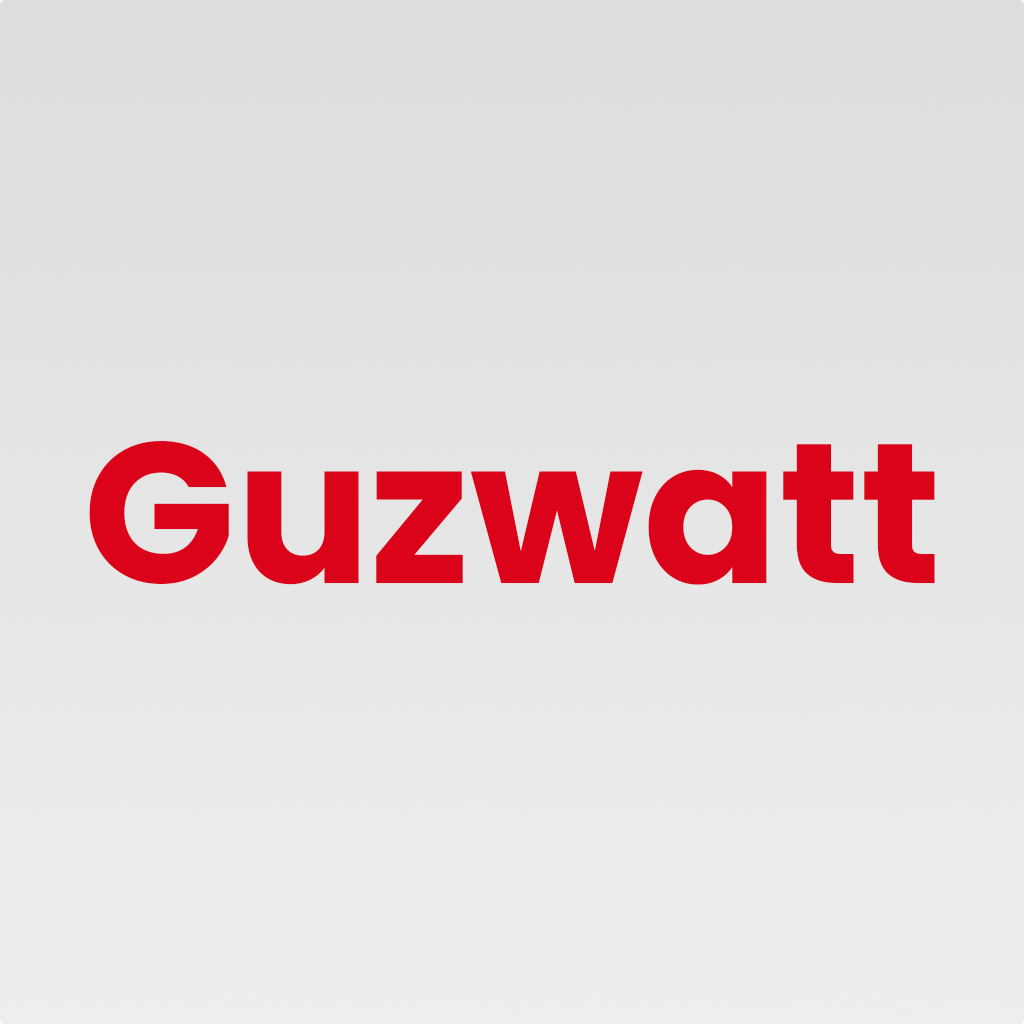
<style>
.page{position:relative;width:1024px;height:1024px}
.page>*{position:absolute;margin:0}
.t1{font:200px "Poppins-Bold";color:#da0319}
</style>
<div class="page">
<p class="t1" style="left:89px;top:441px;width:846px;height:144px">Guzwatt</p>
</div>
